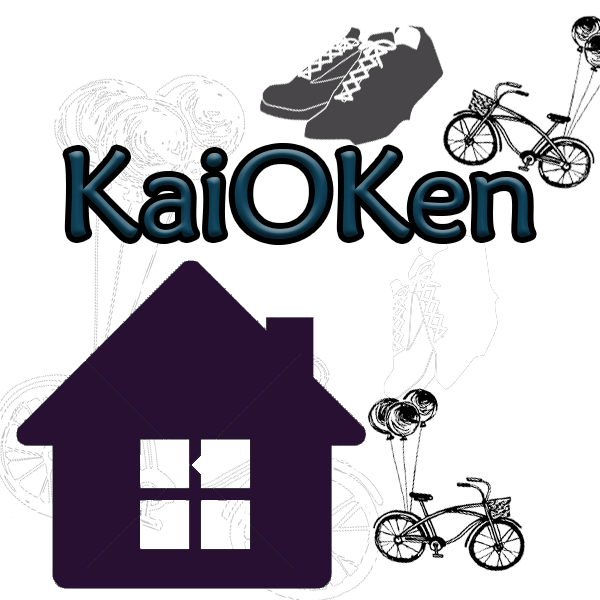
<style>
.page{position:relative;width:600px;height:600px;background:#ffffff}
.page>*{position:absolute;margin:0}
.t1{font:121.9px "MaiandraGD-Regular"}
</style>
<div class="page">
<p class="t1" style="left:68px;top:149px;width:463px;height:90px">KaiOKen</p>
</div>
